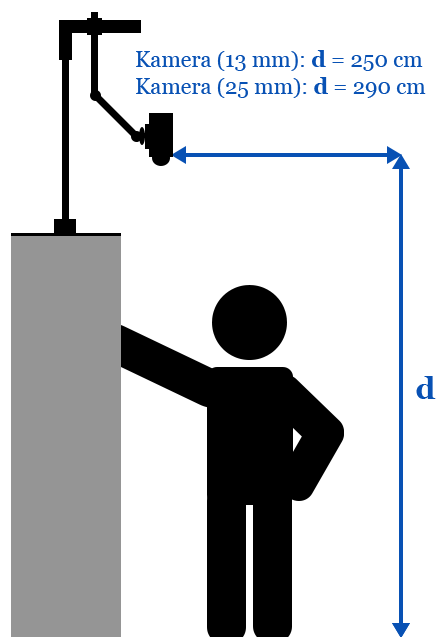
<style>
.page{position:relative;width:444px;height:637px;background:#ffffff}
.page>*{position:absolute;margin:0}
.t1{font:22px "Georgia";color:#0851b4}
.t2{font:22px "Georgia-Bold";color:#0851b4}
.t3{font:30px "Georgia-Bold";color:#0851b4}
</style>
<div class="page">
<p class="t1" style="left:136px;top:50px;width:290px;height:48px">Kamera (13 mm): <span class="t2">d</span> = 250 cm<br>Kamera (25 mm): <span class="t2">d</span> = 290 cm</p>
<p class="t3" style="left:416px;top:376px;width:20px;height:23px">d</p>
</div>
